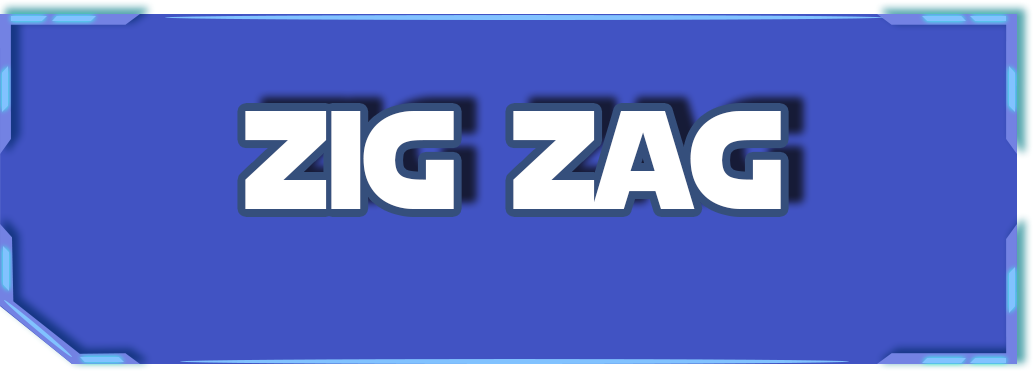
<style>
.page{position:relative;width:1033px;height:385px;background:#4153c3}
.page>*{position:absolute;margin:0}
.t1{font:138.9px "StarJedi";letter-spacing:0.001em;color:#ffffff;scale:0.9 1}
</style>
<div class="page">
<p class="t1" style="left:245px;top:111px;width:536px;height:98px">zig zag</p>
</div>
